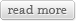
<style>
.page{position:relative;width:76px;height:21px}
.page>*{position:absolute;margin:0}
.t1{font:14px "Baskerville";letter-spacing:0.01em;color:#666666}
</style>
<div class="page">
<p class="t1" style="left:8px;top:5px;width:59px;height:9px">read more</p>
</div>
